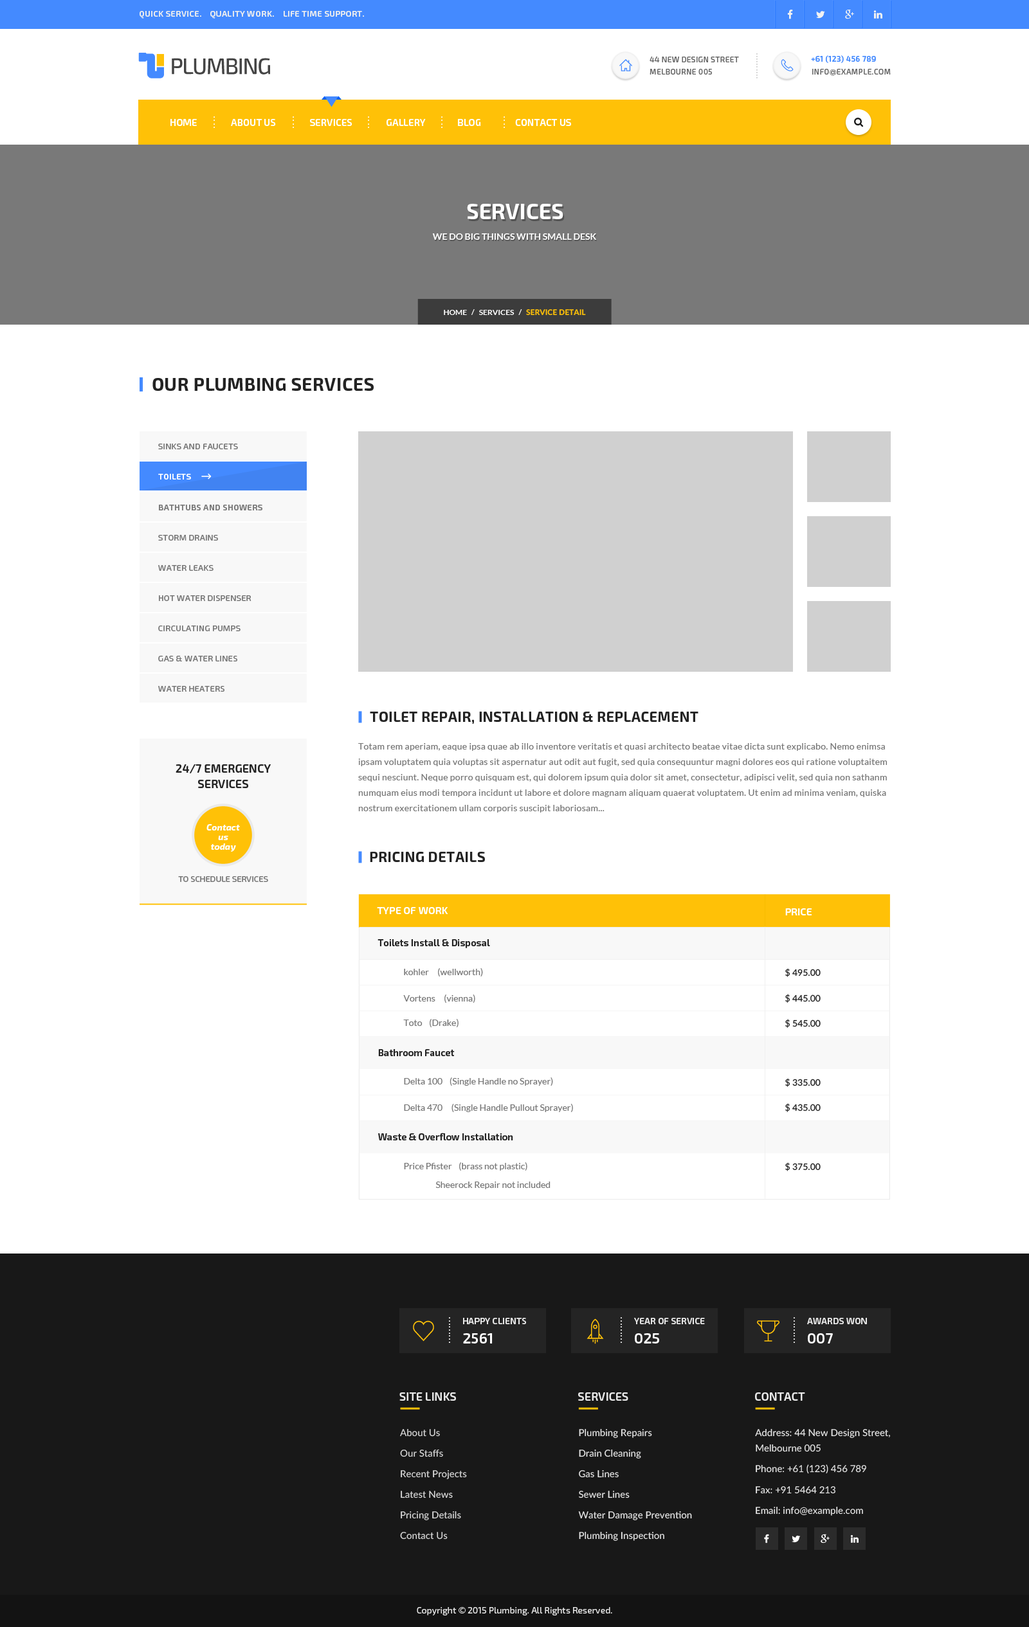
<style>
.page{position:relative;width:1029px;height:1627px;background:#ffffff}
.page>*{position:absolute;margin:0}
.t1{font:8.4px "Exo2.0-SemiBold";letter-spacing:0.03em;color:#eeeeee;text-transform:uppercase}
.t2{font:7.7px "Exo2.0-SemiBold";letter-spacing:0.1em;color:#cccccc;text-transform:uppercase}
.t3{font:7.7px/12.2px "Exo2.0-Medium";letter-spacing:0.03em;color:#666666;text-transform:uppercase}
.t4{font:7.7px "Exo2.0-SemiBold";letter-spacing:0.03em;color:#448aff;text-transform:uppercase}
.t5{font:7.7px "Exo2.0-Medium";letter-spacing:0.03em;color:#666666;text-transform:uppercase}
.t6{font:7.7px "Montserrat-Regular";letter-spacing:0.03em;color:#666666;text-transform:uppercase}
.t7{font:9.6px "Exo2.0-SemiBold";color:#ffffff;text-transform:uppercase}
.t8{font:7.7px "Exo2.0-SemiBold";letter-spacing:0.2em;color:#ffffff;text-transform:uppercase}
.t9{font:21.9px "Exo2.0-Bold";color:#ffffff;text-transform:uppercase}
.t10{font:9px "Lato-Bold";color:#ffffff;text-transform:uppercase}
.t11{font:7.7px "Lato-Bold";color:#ffffff;text-transform:uppercase}
.t12{font:7.7px "Lato-Heavy";color:#ffc107;text-transform:uppercase}
.t13{font:18px "Exo2.0-Bold";letter-spacing:0.02em;color:#232323;text-transform:uppercase}
.t14{font:8.4px "Exo2.0-Regular";letter-spacing:0.02em;color:#777777;text-transform:uppercase}
.t15{font:8.4px "Exo2.0-SemiBold";letter-spacing:0.02em;color:#ffffff;text-transform:uppercase}
.t16{font:8.4px "Exo2.0-SemiBold";letter-spacing:0.02em;color:#777777;text-transform:uppercase}
.t17{font:14.1px "Exo2.0-Bold";letter-spacing:0.02em;color:#232323;text-transform:uppercase}
.t18{font:9px/15.4px "Lato-Regular";letter-spacing:0.02em;color:#777777}
.t19{font:11.6px/15.4px "Exo2.0-SemiBold";color:#232323;text-transform:uppercase}
.t20{font:9px/3.2px "Exo2.0-BoldItalic";color:#ffffff}
.t21{font:8.4px "Exo2.0-Regular";color:#777777;text-transform:uppercase}
.t22{font:10.3px "Exo2.0-SemiBold";color:#ffffff;text-transform:uppercase}
.t23{font:9.6px "Exo2.0-SemiBold";color:#232323}
.t24{font:9px "Lato-Regular";color:#777777}
.t25{font:9px "Lato-Semibold";color:#232323}
.t26{font:9px "Lato-Medium";color:#232323}
.t27{font:7.7px "Exo2.0-SemiBold";letter-spacing:0.15em;color:#ffffff;text-transform:uppercase}
.t28{font:9px "Exo2.0-SemiBold";color:#e8e8e8;text-transform:uppercase}
.t29{font:14.8px "Exo2.0-SemiBold";color:#ffffff;text-transform:uppercase}
.t30{font:11.6px "Exo2.0-SemiBold";color:#e8e8e8;text-transform:uppercase}
.t31{font:9.6px/20.6px "Lato-Medium";color:#dadada}
.t32{font:9.6px/20.6px "Lato-Medium";color:#e8e8e8}
.t33{font:9.6px/15.4px "Lato-Medium";color:#e8e8e8}
.t34{font:9.6px "Lato-Medium";color:#e8e8e8}
.t35{font:9px "Exo2.0-Regular";color:#e8e8e8}
</style>
<div class="page">
<p class="t1" style="left:140px;top:11px;width:224px;height:8px">Quick Service.    Quality Work.    life time support.</p>
<p class="t2" style="left:756px;top:53px;width:1px;height:25px;rotate:90deg">..........</p>
<p class="t3" style="left:649px;top:57px;width:90px;height:18px">44 new design street<br>melbourne 005</p>
<p class="t4" style="left:811px;top:55px;width:65px;height:8px">+61 (123) 456 789</p>
<p class="t5" style="left:812px;top:69px;width:78px;height:7px">info<span class="t6">@</span>example.com</p>
<p class="t7" style="left:170px;top:119px;width:401px;height:7px">Home                About Us                Services                gALLERY               Blog                Contact us</p>
<p class="t8" style="left:213px;top:116px;width:2px;height:12px;rotate:-90deg">....</p>
<p class="t8" style="left:292px;top:116px;width:2px;height:12px;rotate:-90deg">....</p>
<p class="t8" style="left:368px;top:116px;width:1px;height:12px;rotate:-90deg">....</p>
<p class="t8" style="left:441px;top:116px;width:1px;height:12px;rotate:-90deg">....</p>
<p class="t8" style="left:503px;top:116px;width:2px;height:12px;rotate:-90deg">....</p>
<p class="t9" style="left:467px;top:204px;width:96px;height:15px">services</p>
<p class="t10" style="left:432px;top:233px;width:164px;height:7px">we do big things with small desk</p>
<p class="t11" style="left:444px;top:309px;width:142px;height:7px">home   /   services   /   <span class="t12">service detail</span></p>
<p class="t13" style="left:152px;top:378px;width:222px;height:13px">our plumbing services</p>
<p class="t14" style="left:158px;top:444px;width:80px;height:5px">sinks and faucets</p>
<p class="t15" style="left:158px;top:474px;width:33px;height:6px">toilets</p>
<p class="t16" style="left:159px;top:505px;width:103px;height:5px">Bathtubs and Showers</p>
<p class="t14" style="left:158px;top:535px;width:60px;height:6px">Storm Drains</p>
<p class="t14" style="left:158px;top:565px;width:55px;height:6px">Water Leaks</p>
<p class="t14" style="left:159px;top:595px;width:92px;height:6px">Hot Water Dispenser</p>
<p class="t14" style="left:158px;top:626px;width:82px;height:5px">Circulating Pumps</p>
<p class="t14" style="left:158px;top:656px;width:79px;height:6px">Gas &amp; Water Lines</p>
<p class="t14" style="left:158px;top:686px;width:66px;height:6px">Water Heaters</p>
<p class="t17" style="left:370px;top:712px;width:328px;height:12px">Toilet Repair, installation &amp; Replacement</p>
<p class="t18" style="left:358px;top:743px;width:529px;height:70px">Totam rem aperiam, eaque ipsa quae ab illo inventore veritatis et quasi architecto beatae vitae dicta sunt explicabo. Nemo enimsa ipsam voluptatem quia voluptas sit aspernatur aut odit aut fugit, sed quia consequuntur magni dolores eos qui ratione voluptaitem sequi nesciunt. Neque porro quisquam est, qui dolorem ipsum quia dolor sit amet, consectetur, adipisci velit, sed quia non sathanm numquam eius modi tempora incidunt ut labore et dolore magnam aliquam quaerat voluptatem. Ut enim ad minima veniam, quiska nostrum exercitationem ullam corporis suscipit laboriosam...<br> nisi ut aliquid ex ea commodi consequatur? Quis autem vel eum iureas reprehenderit qui in ea voluptate velit esse quam nihil molestiae consequatur.</p>
<p class="t19" style="left:176px;top:764px;width:95px;height:24px;text-align:center">24/7 emergency<br>services</p>
<p class="t20" style="left:206px;top:824px;width:34px;height:28px;text-align:center">Contact<br>us<br>today</p>
<p class="t17" style="left:370px;top:852px;width:115px;height:10px">pricing details</p>
<p class="t21" style="left:178px;top:876px;width:90px;height:6px">To schedule Services</p>
<p class="t22" style="left:377px;top:907px;width:71px;height:7px">type of work</p>
<p class="t22" style="left:785px;top:908px;width:27px;height:7px">price</p>
<p class="t23" style="left:377px;top:939px;width:113px;height:9px">Toilets Install &amp; Disposal</p>
<p class="t24" style="left:404px;top:968px;width:79px;height:9px">kohler     (wellworth)</p>
<p class="t25" style="left:785px;top:968px;width:35px;height:9px">$ 495.00</p>
<p class="t24" style="left:403px;top:995px;width:72px;height:9px">Vortens     (vienna)</p>
<p class="t26" style="left:785px;top:994px;width:35px;height:9px">$ 445.00</p>
<p class="t24" style="left:403px;top:1019px;width:55px;height:9px">Toto    (Drake)</p>
<p class="t26" style="left:785px;top:1019px;width:35px;height:9px">$ 545.00</p>
<p class="t23" style="left:378px;top:1049px;width:77px;height:7px">Bathroom Faucet</p>
<p class="t24" style="left:404px;top:1077px;width:149px;height:9px">Delta 100    (Single Handle no Sprayer)</p>
<p class="t25" style="left:785px;top:1078px;width:35px;height:9px">$ 335.00</p>
<p class="t24" style="left:404px;top:1104px;width:169px;height:9px">Delta 470     (Single Handle Pullout Sprayer)</p>
<p class="t26" style="left:785px;top:1103px;width:35px;height:9px">$ 435.00</p>
<p class="t23" style="left:378px;top:1133px;width:135px;height:7px">Waste &amp; Overflow Installation</p>
<p class="t24" style="left:404px;top:1162px;width:123px;height:9px">Price Pfister    (brass not plastic)</p>
<p class="t25" style="left:785px;top:1162px;width:35px;height:9px">$ 375.00</p>
<p class="t24" style="left:435px;top:1182px;width:115px;height:7px">Sheerock Repair not included</p>
<p class="t27" style="left:449px;top:1317px;width:1px;height:26px;rotate:90deg">.........</p>
<p class="t28" style="left:463px;top:1318px;width:63px;height:6px">happy clients</p>
<p class="t27" style="left:620px;top:1317px;width:2px;height:26px;rotate:90deg">.........</p>
<p class="t28" style="left:634px;top:1318px;width:71px;height:6px">year of service</p>
<p class="t27" style="left:793px;top:1317px;width:2px;height:26px;rotate:90deg">.........</p>
<p class="t28" style="left:807px;top:1318px;width:60px;height:6px">awards won</p>
<p class="t29" style="left:463px;top:1333px;width:29px;height:11px">2561</p>
<p class="t29" style="left:634px;top:1333px;width:25px;height:11px">025</p>
<p class="t29" style="left:807px;top:1333px;width:26px;height:11px">007</p>
<p class="t30" style="left:399px;top:1392px;width:57px;height:9px">site links</p>
<p class="t30" style="left:578px;top:1392px;width:50px;height:9px">services</p>
<p class="t30" style="left:755px;top:1392px;width:50px;height:9px">Contact</p>
<p class="t31" style="left:400px;top:1429px;width:67px;height:111px">About Us<br>Our Staffs     <br>Recent Projects       <br>Latest News         <br>Pricing Details<br>Contact Us</p>
<p class="t32" style="left:578px;top:1428px;width:114px;height:113px">Plumbing Repairs<br>Drain Cleaning<br>Gas Lines<br>Sewer Lines<br>Water Damage Prevention<br>Plumbing Inspection</p>
<p class="t33" style="left:755px;top:1428px;width:135px;height:24px">Address: 44 New Design Street,<br>Melbourne 005</p>
<p class="t34" style="left:755px;top:1464px;width:111px;height:10px">Phone: +61 (123) 456 789</p>
<p class="t34" style="left:755px;top:1486px;width:80px;height:8px">Fax: +91 5464 213</p>
<p class="t34" style="left:755px;top:1506px;width:108px;height:10px">Email: info@example.com</p>
<p class="t35" style="left:417px;top:1607px;width:195px;height:9px">Copyright © 2015 Plumbing. All Rights Reserved.</p>
</div>
